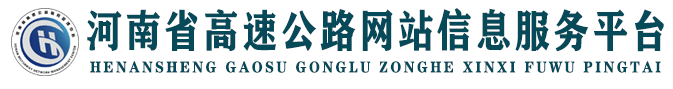
<style>
.page{position:relative;width:673px;height:89px;background:#ffffff}
.page>*{position:absolute;margin:0}
.t1{font:44.5px "FZCHSJW--GB1-0";letter-spacing:0.08em;color:#064959;scale:0.81 1}
.t2{font:16px "FZCHSJW--GB1-0";letter-spacing:0.18em;color:#064959;scale:0.88 1}
</style>
<div class="page">
<p class="t1" style="left:87px;top:8px;width:577px;height:44px">河南省高速公路网站信息服务平台</p>
<p class="t2" style="left:90px;top:61px;width:571px;height:12px">HENANSHENG GAOSU GONGLU ZONGHE XINXI FUWU PINGTAI</p>
</div>
